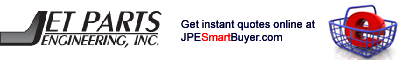
<style>
.page{position:relative;width:400px;height:60px;background:#ffffff}
.page>*{position:absolute;margin:0}
.t1{font:11px "ArialMT";color:#000033}
.t2{font:11px "ArialMT";color:#ff0000}
</style>
<div class="page">
<p class="t1" style="left:181px;top:20px;width:134px;height:24px">Get instant quotes online at<br>JPE<span class="t2">Smart</span>Buyer.com</p>
</div>
